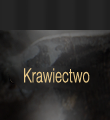
<style>
.page{position:relative;width:110px;height:120px}
.page>*{position:absolute;margin:0}
.t1{font:19.6px "HelveticaNeueCE-Light";letter-spacing:0.025em;color:#e4c586;scale:0.64 1}
</style>
<div class="page">
<p class="t1" style="left:24px;top:68px;width:66px;height:15px">Krawiectwo</p>
</div>
